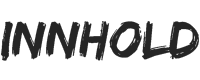
<style>
.page{position:relative;width:200px;height:80px;background:#ffffff}
.page>*{position:absolute;margin:0}
.t1{font:54.5px "EdoSZ";letter-spacing:-0.01em;color:#252525;text-transform:uppercase}
</style>
<div class="page">
<p class="t1" style="left:1px;top:21px;width:198px;height:40px">Innhold</p>
</div>
